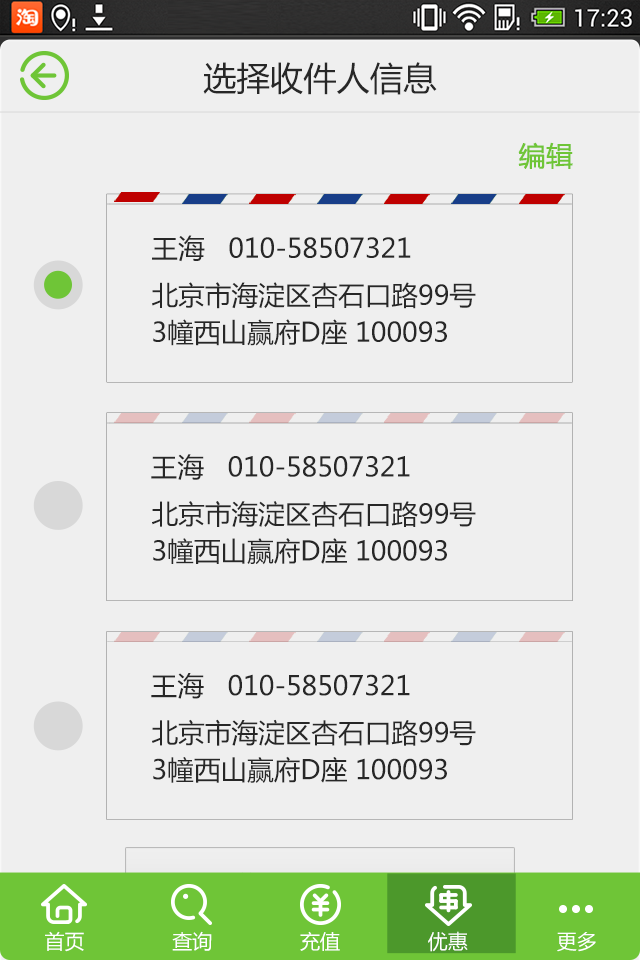
<style>
.page{position:relative;width:640px;height:960px;background:#efefef}
.page>*{position:absolute;margin:0}
.t1{font:33.3px "MicrosoftYaHei";color:#272727}
.t2{font:26.7px "MicrosoftYaHei";color:#6fc537;font-weight:bold}
.t3{font:26.7px "MicrosoftYaHei";color:#272727}
.t4{font:26.7px/37px "MicrosoftYaHei";color:#272727}
.t5{font:20px "MicrosoftYaHei";color:#ffffff}
</style>
<div class="page">
<p class="t1" style="left:203px;top:62px;width:234px;height:33px">选择收件人信息</p>
<p class="t2" style="left:518px;top:142px;width:55px;height:27px">编辑</p>
<p class="t3" style="left:152px;top:235px;width:259px;height:27px">王海   010-58507321</p>
<p class="t4" style="left:152px;top:282px;width:324px;height:64px">北京市海淀区杏石口路99号<br>3幢西山赢府D座 100093</p>
<p class="t3" style="left:151px;top:454px;width:259px;height:26px">王海   010-58507321</p>
<p class="t4" style="left:152px;top:501px;width:324px;height:64px">北京市海淀区杏石口路99号<br>3幢西山赢府D座 100093</p>
<p class="t3" style="left:151px;top:673px;width:259px;height:26px">王海   010-58507321</p>
<p class="t4" style="left:152px;top:719px;width:324px;height:64px">北京市海淀区杏石口路99号<br>3幢西山赢府D座 100093</p>
<p class="t5" style="left:45px;top:931px;width:39px;height:21px">首页</p>
<p class="t5" style="left:172px;top:931px;width:40px;height:20px">查询</p>
<p class="t5" style="left:300px;top:931px;width:40px;height:20px">充值</p>
<p class="t5" style="left:428px;top:931px;width:40px;height:21px">优惠</p>
<p class="t5" style="left:557px;top:932px;width:39px;height:20px">更多</p>
</div>
